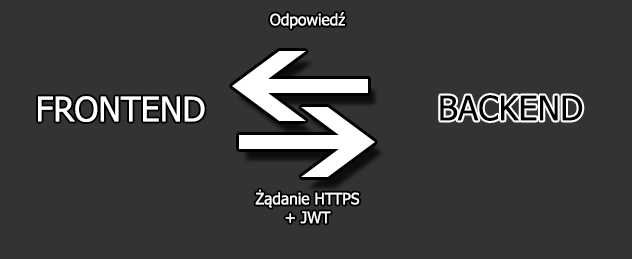
<style>
.page{position:relative;width:632px;height:259px;background:#333333}
.page>*{position:absolute;margin:0}
.t1{font:15.6px "Tahoma";color:#ffffff}
.t2{font:34px "Tahoma";color:#ffffff}
.t3{font:34px "Tahoma";color:#000000}
</style>
<div class="page">
<p class="t1" style="left:270px;top:12px;width:75px;height:17px">Odpowiedź</p>
<p class="t2" style="left:38px;top:96px;width:167px;height:26px">FRONTEND</p>
<p class="t3" style="left:440px;top:95px;width:143px;height:26px">BACKEND</p>
<p class="t1" style="left:255px;top:189px;width:105px;height:35px;text-align:center">Żądanie HTTPS<br>+ JWT</p>
</div>
